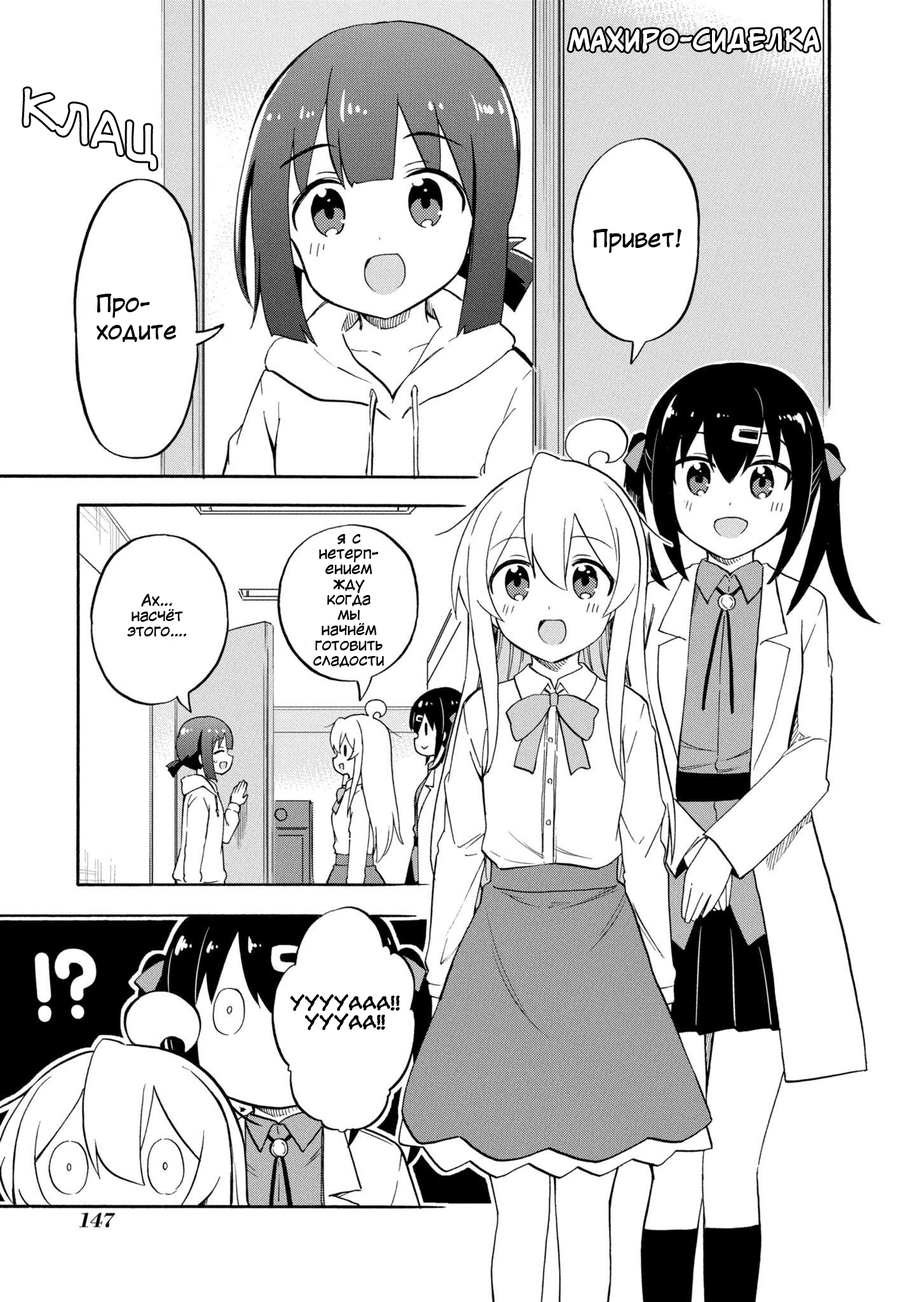
<style>
.page{position:relative;width:916px;height:1302px;background:#ffffff}
.page>*{position:absolute;margin:0}
.t1{font:24.8px "CCMeanwhile-Bold";color:#ffffff}
.t2{font:22.9px "KuraiVoice2";color:#000000}
.t3{font:15.3px/15.3px "KuraiVoice2";color:#000000}
.t4{font:22.9px/19.1px "el_CCEvilSchemes";color:#000000}
</style>
<div class="page">
<p class="t1" style="left:568px;top:28px;width:251px;height:25px">МАХИРО-СИДЕЛКА</p>
<p class="t2" style="left:593px;top:229px;width:88px;height:24px">Привет!</p>
<p class="t2" style="left:97px;top:294px;width:79px;height:48px">Про-<br>ходите</p>
<p class="t3" style="left:313px;top:534px;width:71px;height:133px;text-align:center">я с<br>нетерп-<br>ением<br>жду<br>когда<br>мы<br>начнём<br>готовить<br>сладости</p>
<p class="t3" style="left:127px;top:594px;width:59px;height:42px;text-align:center">Ах...<br>насчёт<br>этого….</p>
<p class="t4" style="left:290px;top:994px;width:110px;height:36px;text-align:center">ууууааа!!<br>Уууаа!!</p>
</div>
